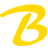
<style>
.page{position:relative;width:48px;height:48px;background:#ffffff}
.page>*{position:absolute;margin:0}
.t1{font:60px "ARBERKLEY";letter-spacing:0.005em;color:#ffd800;font-weight:bold}
</style>
<div class="page">
<p class="t1" style="left:0px;top:4px;width:48px;height:42px">B</p>
</div>
